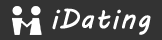
<style>
.page{position:relative;width:162px;height:40px;background:#333333}
.page>*{position:absolute;margin:0}
.t1{font:28px "MVBoli";letter-spacing:0.025em;color:#ffffff;font-weight:bold}
</style>
<div class="page">
<p class="t1" style="left:52px;top:8px;width:99px;height:27px">iDating</p>
</div>
